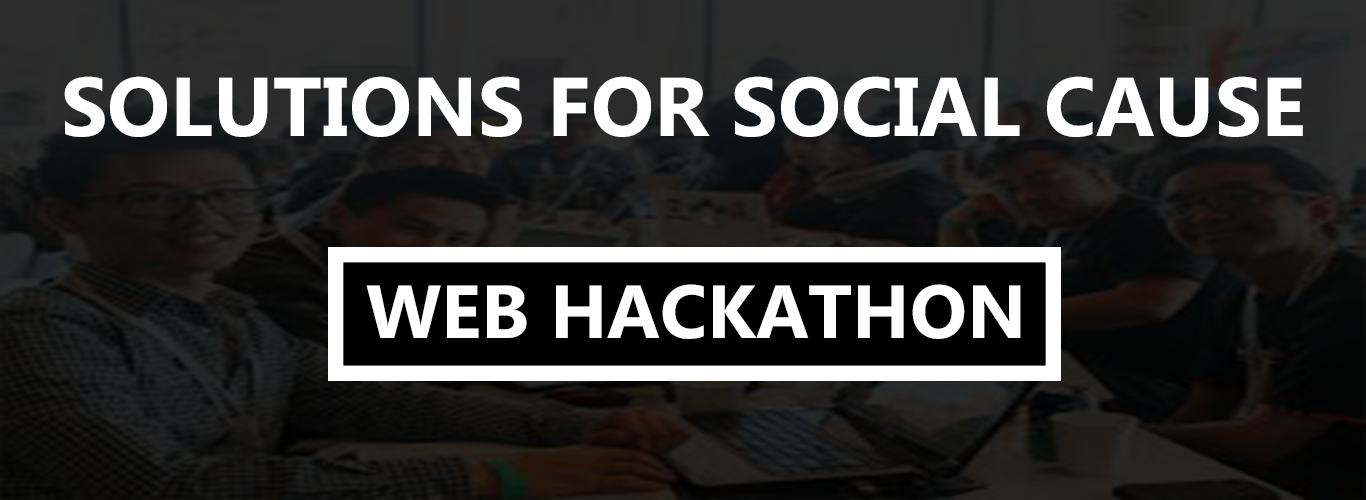
<style>
.page{position:relative;width:1366px;height:500px}
.page>*{position:absolute;margin:0}
.t1{font:83.3px "MicrosoftPhagsPa-Bold";color:#ffffff}
.t2{font:75px "MicrosoftPhagsPa-Bold";color:#ffffff}
</style>
<div class="page">
<p class="t1" style="left:64px;top:76px;width:1239px;height:61px">SOLUTIONS FOR SOCIAL CAUSE</p>
<p class="t2" style="left:366px;top:284px;width:655px;height:55px">WEB HACKATHON</p>
</div>
